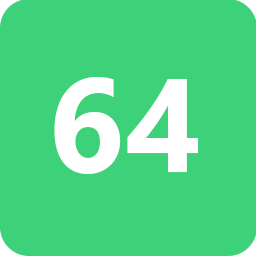
<style>
.page{position:relative;width:256px;height:256px;background:#3dd179}
.page>*{position:absolute;margin:0}
.t1{font:133.3px "LeelawadeeUI-Bold";color:#ffffff}
</style>
<div class="page">
<p class="t1" style="left:54px;top:77px;width:144px;height:97px">64</p>
</div>
